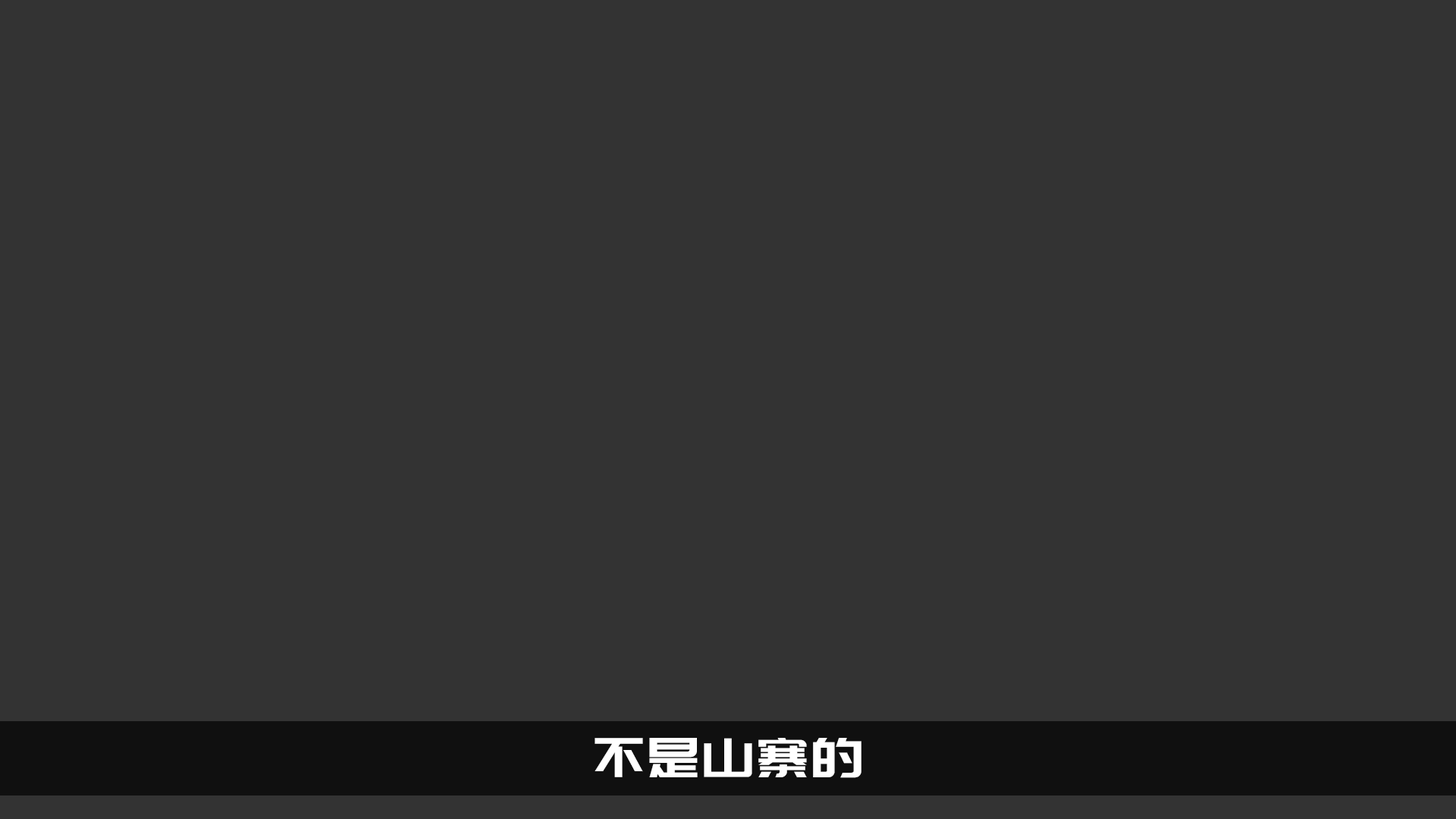
<style>
.page{position:relative;width:1456px;height:819px;background:#333333}
.page>*{position:absolute;margin:0}
.t1{font:54.6px "PangMenZhengDao-3";color:#ffffff}
</style>
<div class="page">
<p class="t1" style="left:595px;top:738px;width:266px;height:40px">不是山寨的</p>
</div>
